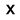
<style>
.page{position:relative;width:20px;height:20px;background:#ffffff}
.page>*{position:absolute;margin:0}
.t1{font:18px "ArialMT";color:#010101}
</style>
<div class="page">
<p class="t1" style="left:6px;top:4px;width:9px;height:11px">x</p>
</div>
